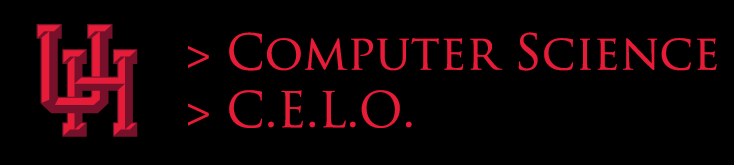
<style>
.page{position:relative;width:734px;height:165px;background:#000000}
.page>*{position:absolute;margin:0}
.t1{font:48px "TrajanPro-Regular";color:#e61c38}
</style>
<div class="page">
<p class="t1" style="left:188px;top:32px;width:529px;height:96px">&gt; Computer Science<br>&gt; C.E.L.O.</p>
</div>
